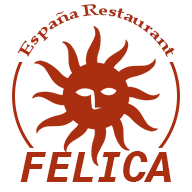
<style>
.page{position:relative;width:192px;height:192px;background:#ffffff}
.page>*{position:absolute;margin:0}
.t1{font:16px/15px "BookAntiqua-Bold";letter-spacing:-0.02em;color:#a92f10}
.t2{font:43.6px "Monospace821BT-BoldItalic";letter-spacing:-0.02em;color:#a92f10}
</style>
<div class="page">
<p class="t1" style="left:17px;top:4px;width:158px;height:54px">España Restaurant</p>
<p class="t2" style="left:20px;top:151px;width:151px;height:31px">FELICA</p>
</div>
